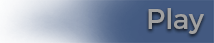
<style>
.page{position:relative;width:214px;height:43px}
.page>*{position:absolute;margin:0}
.t1{font:28px "Montserrat-Regular";color:#a1a1a1}
</style>
<div class="page">
<p class="t1" style="left:148px;top:8px;width:56px;height:26px">Play</p>
</div>
